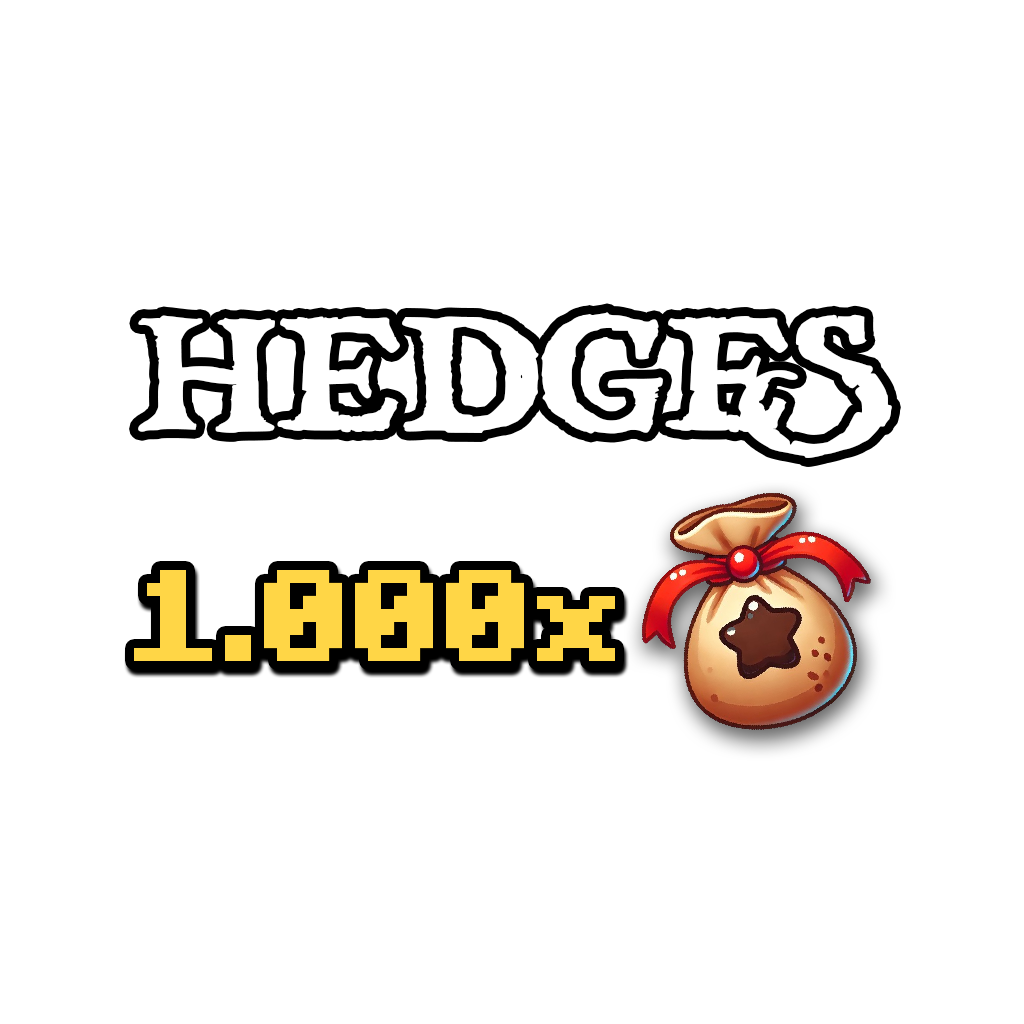
<style>
.page{position:relative;width:1024px;height:1024px;background:#ffffff}
.page>*{position:absolute;margin:0}
.t1{font:160.5px "treasuremap";color:#ffffff}
.t2{font:130px "Minecraft-Bold";color:#ffd646}
</style>
<div class="page">
<p class="t1" style="left:138px;top:312px;width:754px;height:146px">HEDGES</p>
<p class="t2" style="left:134px;top:570px;width:481px;height:91px">1.000x</p>
</div>
